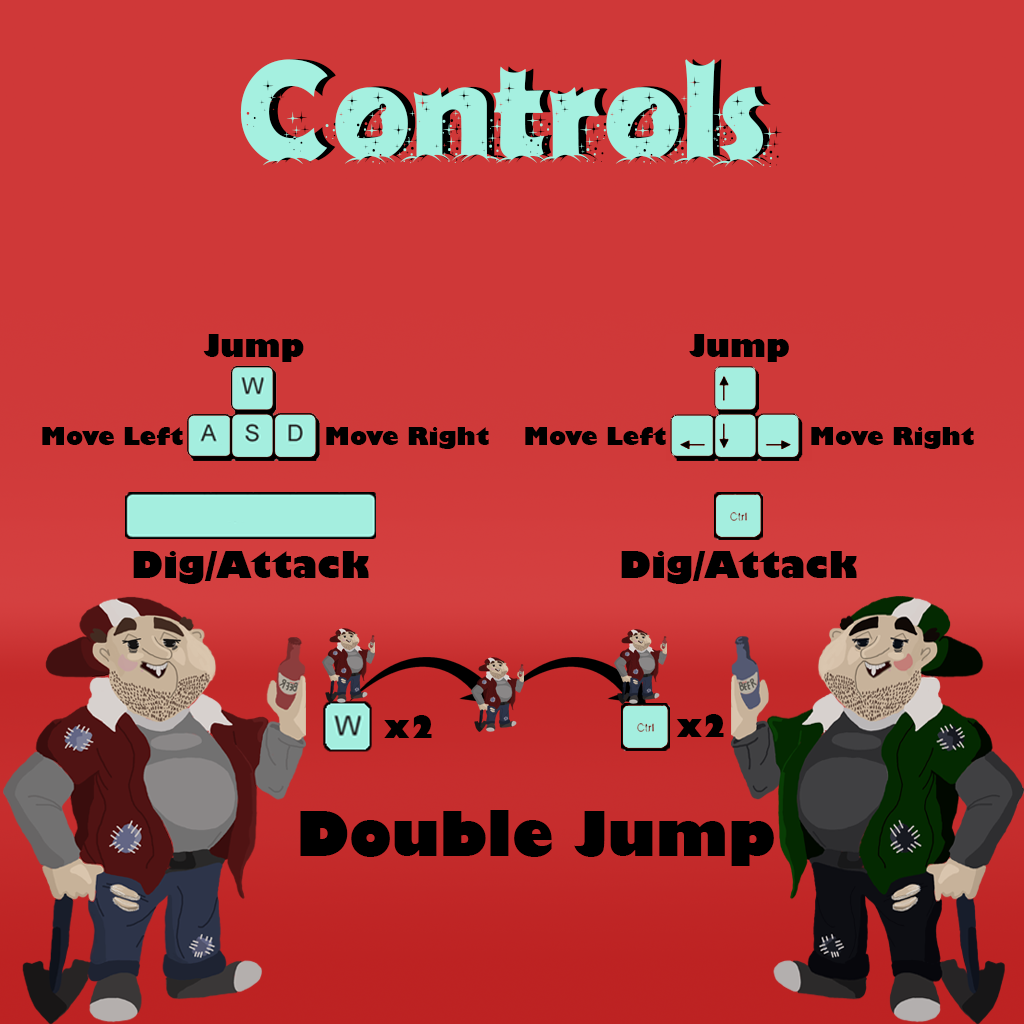
<style>
.page{position:relative;width:1024px;height:1024px;background:#cf3838}
.page>*{position:absolute;margin:0}
.t1{font:142.8px "FirstChristmas";color:#a5f0e0}
.t2{font:142.2px "FirstChristmas";color:#a5f0e0}
.t3{font:30px "GillSans-UltraBold";color:#000000}
.t4{font:24px "GillSans-UltraBold";color:#000000}
.t5{font:36px "GillSans-UltraBold";color:#000000}
.t6{font:60px "GillSans-UltraBold";color:#000000}
</style>
<div class="page">
<p class="t1" style="left:240px;top:59px;width:536px;height:108px">Controls</p>
<p class="t2" style="left:249px;top:59px;width:534px;height:107px">Controls</p>
<p class="t3" style="left:203px;top:334px;width:101px;height:28px">Jump</p>
<p class="t3" style="left:689px;top:334px;width:100px;height:28px">Jump</p>
<p class="t4" style="left:42px;top:427px;width:141px;height:18px">Move Left</p>
<p class="t4" style="left:326px;top:427px;width:163px;height:22px">Move Right</p>
<p class="t4" style="left:525px;top:427px;width:141px;height:18px">Move Left</p>
<p class="t4" style="left:811px;top:427px;width:163px;height:22px">Move Right</p>
<p class="t5" style="left:133px;top:551px;width:236px;height:33px">Dig/Attack</p>
<p class="t5" style="left:621px;top:551px;width:236px;height:33px">Dig/Attack</p>
<p class="t3" style="left:384px;top:715px;width:48px;height:23px">x2</p>
<p class="t3" style="left:676px;top:714px;width:48px;height:23px">x2</p>
<p class="t6" style="left:300px;top:810px;width:474px;height:56px">Double Jump</p>
</div>
